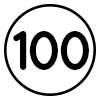
<style>
.page{position:relative;width:100px;height:100px;background:#ffffff}
.page>*{position:absolute;margin:0}
.t1{font:55.7px "QuicksandBold-Regular";letter-spacing:-0.1em;color:#000000}
</style>
<div class="page">
<p class="t1" style="left:13px;top:31px;width:76px;height:39px">100</p>
</div>
